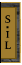
<style>
.page{position:relative;width:22px;height:65px;background:#a07d2f}
.page>*{position:absolute;margin:0}
.t1{font:12px "RingbearerMedium";letter-spacing:0.005em;color:#000000}
.t2{font:10px "Arial-Black";letter-spacing:0.005em;color:#000000}
</style>
<div class="page">
<p class="t1" style="left:5px;top:15px;width:6px;height:8px">s</p>
<p class="t2" style="left:6px;top:26px;width:3px;height:3px">.</p>
<p class="t1" style="left:4px;top:41px;width:7px;height:8px">l</p>
<p class="t1" style="left:6px;top:31px;width:4px;height:7px">i</p>
</div>
